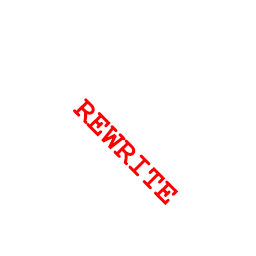
<style>
.page{position:relative;width:256px;height:256px;background:#ffffff}
.page>*{position:absolute;margin:0}
.t1{font:32px "CourierNewPS-BoldMT";color:#ff0000;text-transform:uppercase}
</style>
<div class="page">
<p class="t1" style="left:73px;top:98px;width:106px;height:108px;rotate:45deg">Rewrite</p>
</div>
